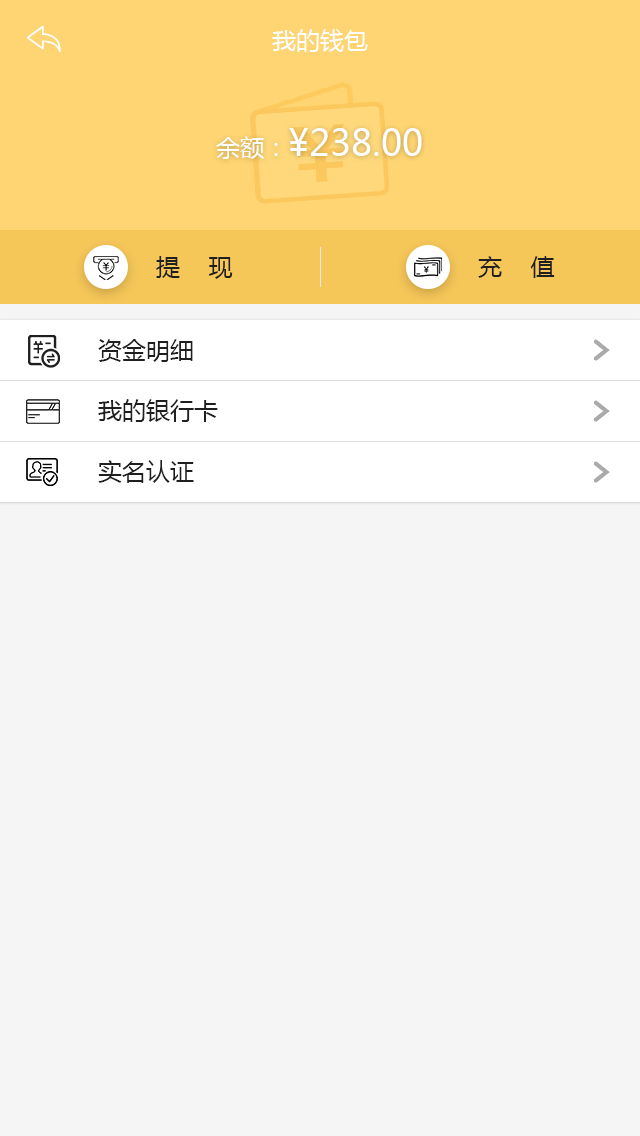
<style>
.page{position:relative;width:640px;height:1136px;background:#f5f5f5}
.page>*{position:absolute;margin:0}
.t1{font:24px "MicrosoftYaHei";color:#ffffff}
.t2{font:36px "MicrosoftYaHei";color:#ffffff}
.t3{font:24px "MicrosoftYaHei";color:#1f1f1f}
</style>
<div class="page">
<p class="t1" style="left:272px;top:29px;width:96px;height:23px">我的钱包</p>
<p class="t2" style="left:216px;top:128px;width:206px;height:31px"><span class="t1">余额：</span>¥238.00</p>
<p class="t3" style="left:156px;top:256px;width:77px;height:23px">提    现</p>
<p class="t3" style="left:478px;top:256px;width:77px;height:22px">充    值</p>
<p class="t3" style="left:98px;top:339px;width:95px;height:23px">资金明细</p>
<p class="t3" style="left:98px;top:399px;width:120px;height:23px">我的银行卡</p>
<p class="t3" style="left:98px;top:460px;width:96px;height:23px">实名认证</p>
</div>
